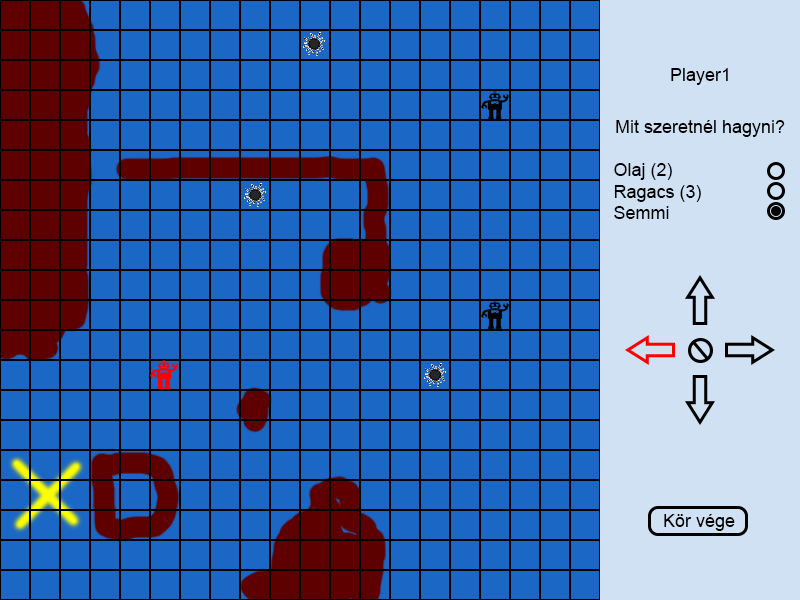
<style>
.page{position:relative;width:800px;height:600px;background:#1b67c5}
.page>*{position:absolute;margin:0}
.t1{font:17.8px "ArialMT";color:#000000}
.t2{font:18px "ArialMT";color:#000000}
.t3{font:18.2px "ArialMT";color:#000000}
</style>
<div class="page">
<p class="t1" style="left:671px;top:68px;width:57px;height:17px">Player1</p>
<p class="t2" style="left:616px;top:120px;width:169px;height:17px">Mit szeretnél hagyni?</p>
<p class="t2" style="left:614px;top:163px;width:87px;height:56px">Olaj (2)<br>Ragacs (3)<br>Semmi</p>
<p class="t3" style="left:664px;top:514px;width:71px;height:17px">Kör vége</p>
</div>
